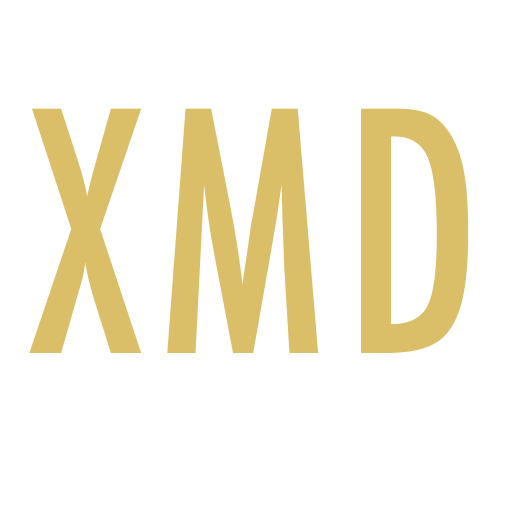
<style>
.page{position:relative;width:512px;height:512px;background:#ffffff}
.page>*{position:absolute;margin:0}
.t1{font:323.5px "Futura-CondensedMedium";letter-spacing:0.06em;color:#dbbf69;text-transform:uppercase;scale:0.91 1}
</style>
<div class="page">
<p class="t1" style="left:29px;top:108px;width:440px;height:245px">xmd</p>
</div>
